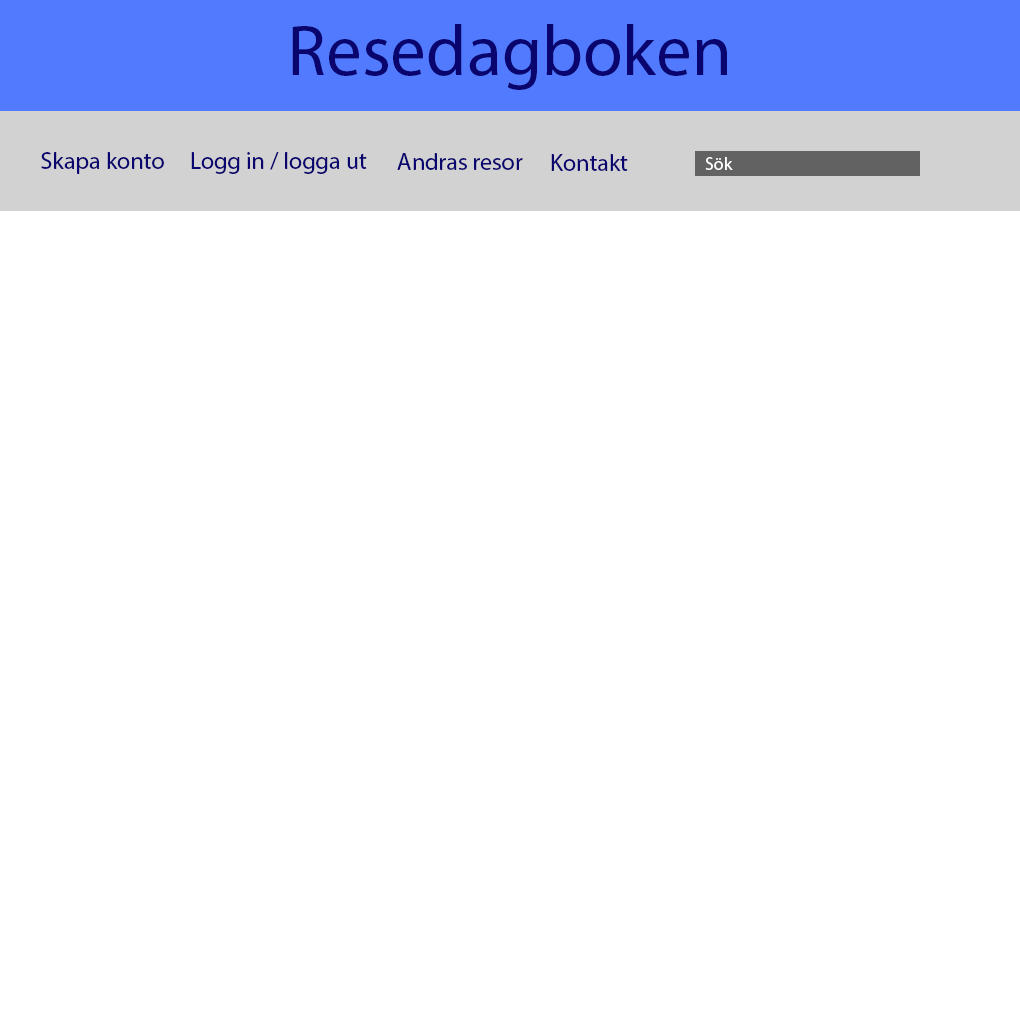
<style>
.page{position:relative;width:1020px;height:1020px;background:#ffffff}
.page>*{position:absolute;margin:0}
.t1{font:72px "MyriadPro-Regular";color:#09046e}
.t2{font:24px "MyriadPro-Regular";color:#09046e}
.t3{font:18px "MyriadPro-Regular";color:#ffffff}
</style>
<div class="page">
<p class="t1" style="left:292px;top:24px;width:435px;height:66px">Resedagboken</p>
<p class="t2" style="left:41px;top:152px;width:123px;height:22px">Skapa konto</p>
<p class="t2" style="left:191px;top:152px;width:176px;height:22px">Logg in / logga ut</p>
<p class="t2" style="left:397px;top:153px;width:126px;height:17px">Andras resor</p>
<p class="t2" style="left:551px;top:154px;width:77px;height:17px">Kontakt</p>
<p class="t3" style="left:705px;top:157px;width:28px;height:13px">Sök</p>
</div>
